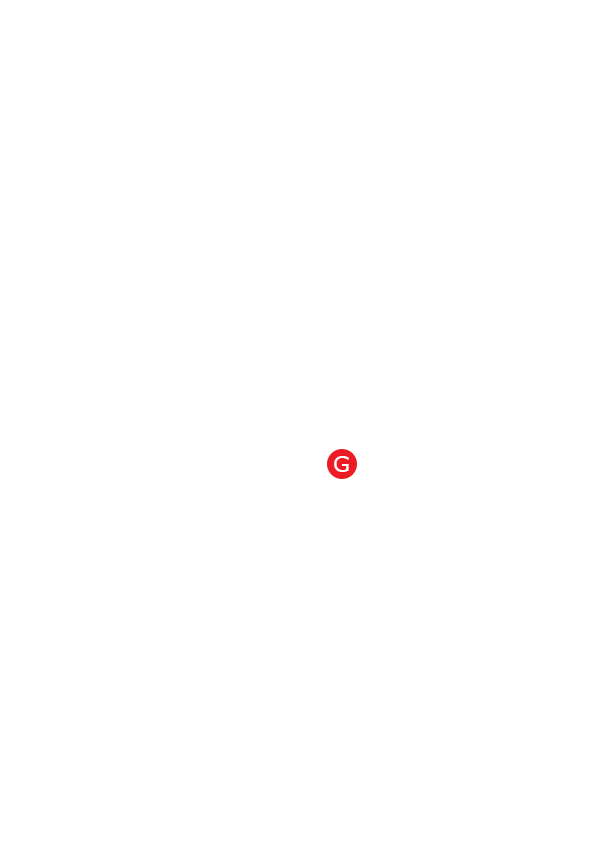
<style>
.page{position:relative;width:595px;height:842px;background:#ffffff}
.page>*{position:absolute;margin:0}
.t1{font:22.2px "MSReferenceSansSerif";color:#ffffff}
</style>
<div class="page">
<p class="t1" style="left:334px;top:456px;width:15px;height:16px">G</p>
</div>
